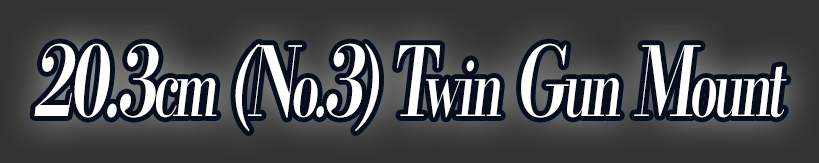
<style>
.page{position:relative;width:819px;height:163px}
.page>*{position:absolute;margin:0}
.t1{font:96px "KochoStd-Heavy";letter-spacing:-0.08em;color:#ffffff;font-style:italic;scale:0.67 1}
.t2{font:76.8px "KochoStd-Heavy";letter-spacing:-0.08em;color:#ffffff;font-style:italic;scale:0.67 1}
</style>
<div class="page">
<p class="t1" style="left:34px;top:43px;width:753px;height:89px">20.3<span class="t2">cm</span> (N<span class="t2">o.</span>3) T<span class="t2">win</span> G<span class="t2">un</span> M<span class="t2">ount</span></p>
</div>
